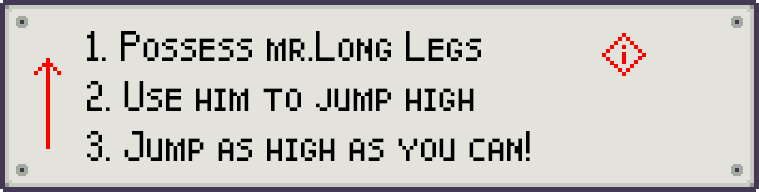
<style>
.page{position:relative;width:759px;height:192px;background:#e3e3db}
.page>*{position:absolute;margin:0}
.t1{font:30px "Pixel-Caps";color:#000000}
</style>
<div class="page">
<p class="t1" style="left:87px;top:31px;width:394px;height:30px">1. Possess mr.Long Legs</p>
<p class="t1" style="left:87px;top:81px;width:387px;height:30px">2. Use him to jump high</p>
<p class="t1" style="left:87px;top:131px;width:443px;height:30px">3. Jump as high as you can!</p>
</div>
